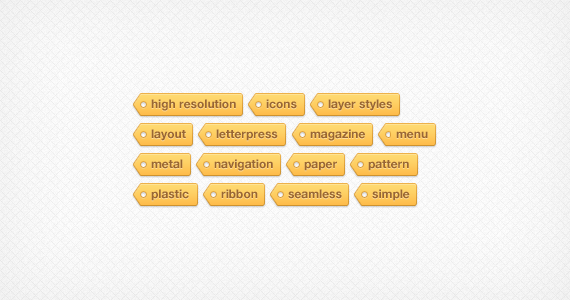
<style>
.page{position:relative;width:570px;height:300px}
.page>*{position:absolute;margin:0}
.t1{font:12px "HelveticaNeue-Bold";color:#996633}
</style>
<div class="page">
<p class="t1" style="left:151px;top:99px;width:85px;height:12px">high resolution</p>
<p class="t1" style="left:266px;top:99px;width:31px;height:10px">icons</p>
<p class="t1" style="left:328px;top:99px;width:64px;height:12px">layer styles</p>
<p class="t1" style="left:151px;top:129px;width:35px;height:12px">layout</p>
<p class="t1" style="left:216px;top:129px;width:62px;height:12px">letterpress</p>
<p class="t1" style="left:310px;top:129px;width:55px;height:12px">magazine</p>
<p class="t1" style="left:396px;top:131px;width:32px;height:8px">menu</p>
<p class="t1" style="left:151px;top:159px;width:32px;height:10px">metal</p>
<p class="t1" style="left:214px;top:159px;width:59px;height:12px">navigation</p>
<p class="t1" style="left:304px;top:161px;width:33px;height:10px">paper</p>
<p class="t1" style="left:368px;top:160px;width:41px;height:11px">pattern</p>
<p class="t1" style="left:151px;top:189px;width:38px;height:12px">plastic</p>
<p class="t1" style="left:221px;top:189px;width:37px;height:10px">ribbon</p>
<p class="t1" style="left:288px;top:189px;width:54px;height:10px">seamless</p>
<p class="t1" style="left:372px;top:189px;width:38px;height:12px">simple</p>
</div>
